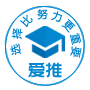
<style>
.page{position:relative;width:90px;height:90px;background:#ffffff}
.page>*{position:absolute;margin:0}
.t1{font:10.5px "MicrosoftYaHei";color:#0288d1}
.t2{font:17.1px "TRENDS";color:#0288d1}
</style>
<div class="page">
<p class="t1" style="left:20px;top:14px;width:13px;height:13px;rotate:-50deg">比</p>
<p class="t1" style="left:37px;top:9px;width:11px;height:11px;rotate:-1deg">努</p>
<p class="t1" style="left:51px;top:11px;width:12px;height:11px;rotate:17deg">力</p>
<p class="t1" style="left:11px;top:28px;width:12px;height:12px;rotate:-82deg">择</p>
<p class="t1" style="left:61px;top:19px;width:15px;height:14px;rotate:44deg">更</p>
<p class="t1" style="left:69px;top:33px;width:13px;height:12px;rotate:77deg">重</p>
<p class="t1" style="left:10px;top:43px;width:12px;height:12px;rotate:-103deg">选</p>
<p class="t1" style="left:70px;top:46px;width:12px;height:12px;rotate:101deg">要</p>
<p class="t2" style="left:28px;top:62px;width:34px;height:16px">爱推</p>
</div>
